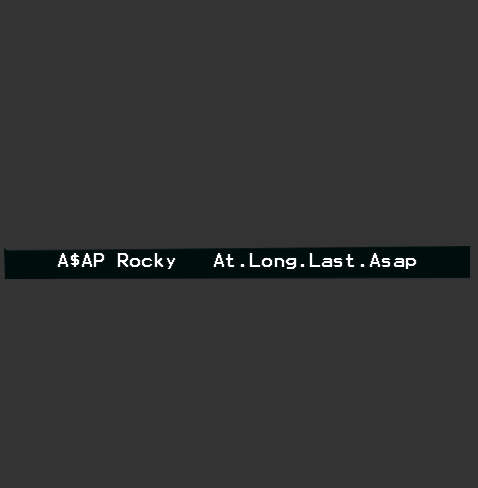
<style>
.page{position:relative;width:478px;height:488px;background:#333333}
.page>*{position:absolute;margin:0}
.t1{font:16.1px "Terminal";color:#ffffff}
</style>
<div class="page">
<p class="t1" style="left:57px;top:253px;width:360px;height:16px">A$AP Rocky   At.Long.Last.Asap</p>
</div>
